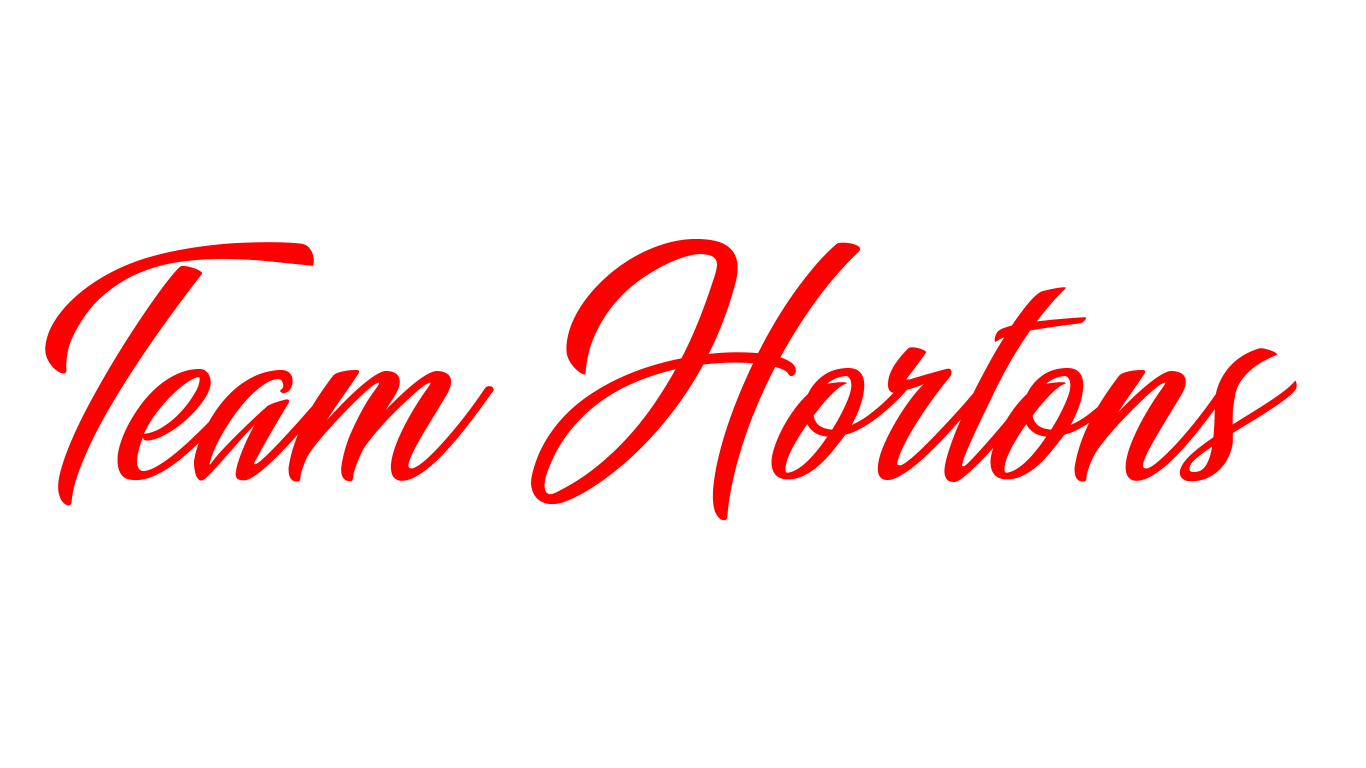
<style>
.page{position:relative;width:1366px;height:768px;background:#ffffff}
.page>*{position:absolute;margin:0}
.t1{font:198px "MiraclePlacePersonalUse";color:#ff0000}
</style>
<div class="page">
<p class="t1" style="left:45px;top:239px;width:1252px;height:282px">Team Hortons</p>
</div>
